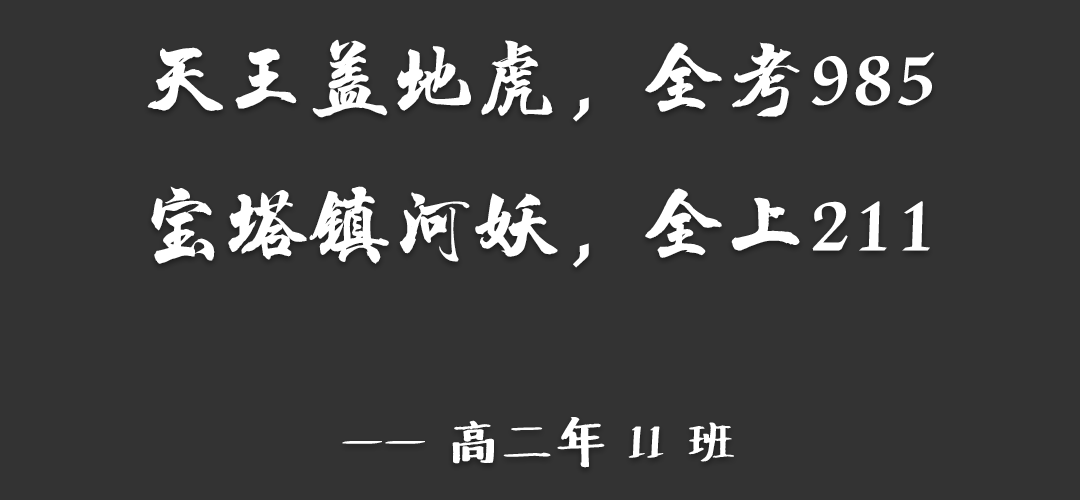
<style>
.page{position:relative;width:1080px;height:500px;background:#333333}
.page>*{position:absolute;margin:0}
.t1{font:83.3px "HYChengXingJ";color:#ffffff}
.t2{font:50px "Undefined";color:#ffffff}
</style>
<div class="page">
<p class="t1" style="left:147px;top:39px;width:788px;height:429px;text-align:center">天王盖地虎，全考985<br>宝塔镇河妖，全上211<br><span class="t2"><br>—— 高二年 11 班</span></p>
</div>
